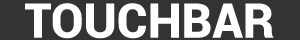
<style>
.page{position:relative;width:300px;height:40px;background:#333333}
.page>*{position:absolute;margin:0}
.t1{font:48px "Roboto-Black";color:#ffffff}
</style>
<div class="page">
<p class="t1" style="left:25px;top:3px;width:249px;height:36px">TOUCHBAR</p>
</div>
